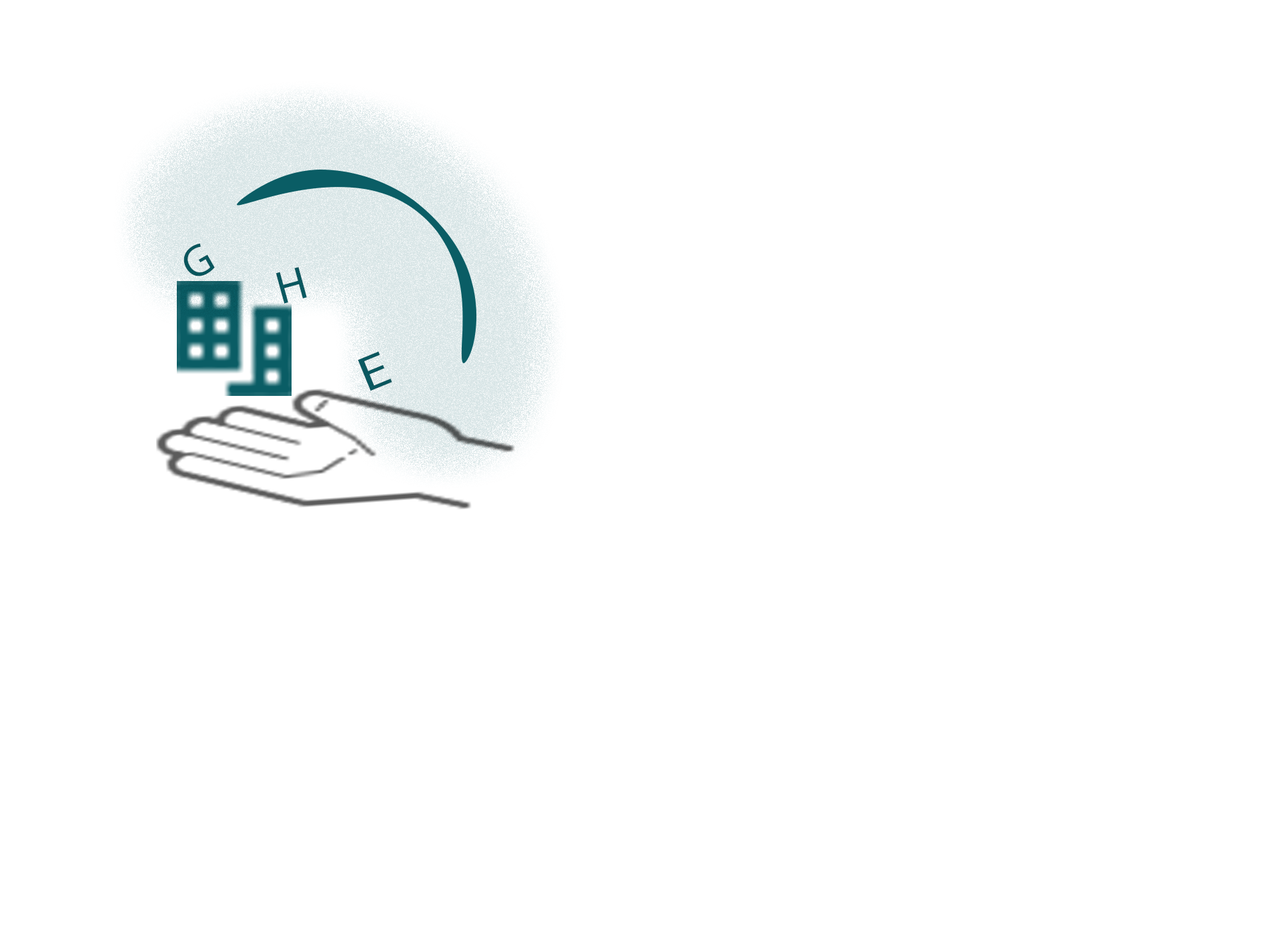
<style>
.page{position:relative;width:1261px;height:946px;background:#ffffff}
.page>*{position:absolute;margin:0}
.t1{font:17.8px "MyriadPro-Regular";color:#08545c}
.t2{font:18.3px "MyriadPro-Regular";color:#09575f}
.t3{font:19.5px "MyriadPro-Regular";color:#09575f;scale:1.23 1}
</style>
<div class="page">
<p class="t1" style="left:183px;top:243px;width:32px;height:33px;rotate:-30deg">G</p>
<p class="t2" style="left:276px;top:267px;width:31px;height:37px;rotate:-15deg">H</p>
<p class="t3" style="left:358px;top:351px;width:34px;height:40px;rotate:-22deg">E</p>
</div>
